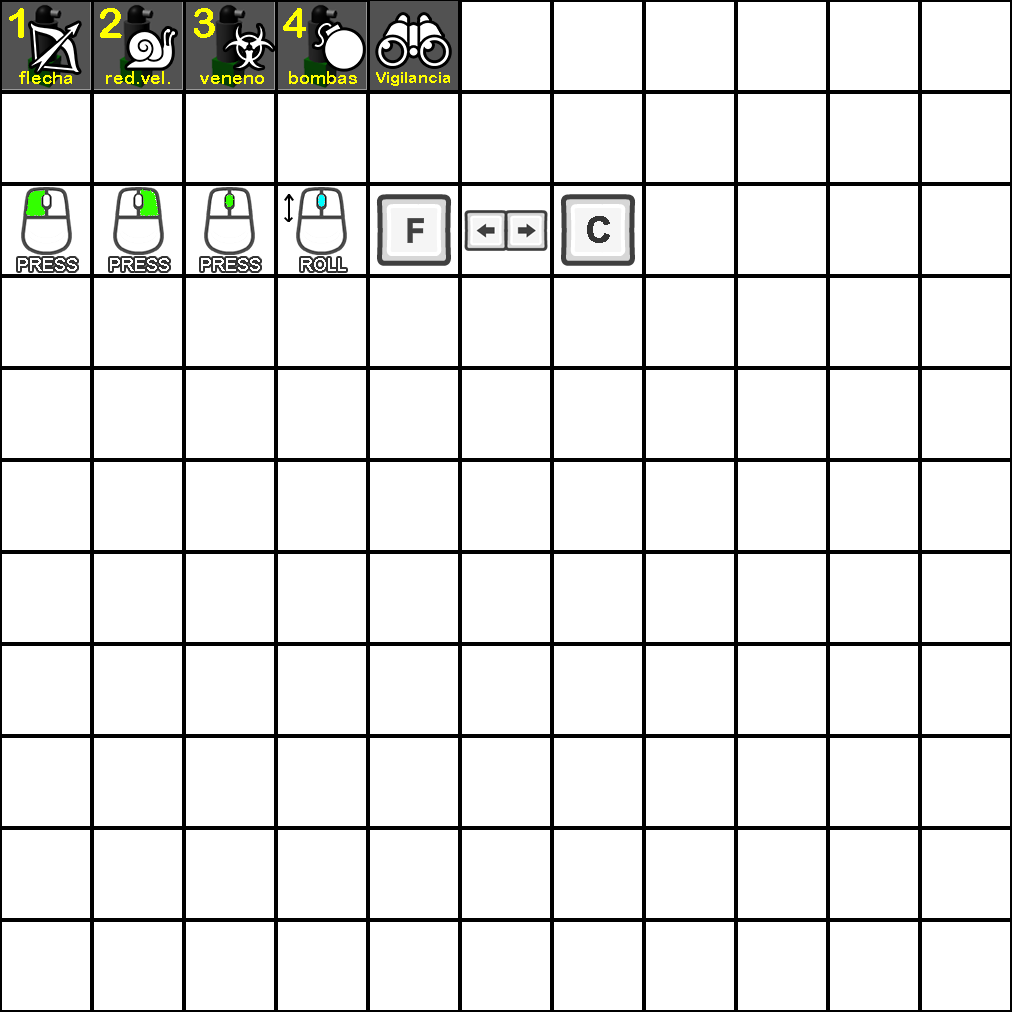
<style>
.page{position:relative;width:1012px;height:1012px;background:#ffffff}
.page>*{position:absolute;margin:0}
.t1{font:42px "ArialRoundedMTBold";color:#ffff00}
.t2{font:18px "ArialRoundedMTBold";color:#ffff00}
.t3{font:16px "ArialRoundedMTBold";color:#ffff00}
.t4{font:36px "Arial-BoldMT";color:#333333;font-weight:bold}
.t5{font:18px "ArialMT";color:#ffffff}
</style>
<div class="page">
<p class="t1" style="left:9px;top:8px;width:15px;height:30px">1</p>
<p class="t1" style="left:100px;top:8px;width:22px;height:30px">2</p>
<p class="t1" style="left:194px;top:8px;width:21px;height:30px">3</p>
<p class="t1" style="left:283px;top:8px;width:23px;height:30px">4</p>
<p class="t2" style="left:19px;top:71px;width:53px;height:13px">flecha</p>
<p class="t2" style="left:106px;top:71px;width:64px;height:13px">red.vel.</p>
<p class="t2" style="left:200px;top:75px;width:64px;height:9px">veneno</p>
<p class="t2" style="left:289px;top:71px;width:68px;height:13px">bombas</p>
<p class="t3" style="left:376px;top:72px;width:74px;height:14px">Vigilancia</p>
<p class="t4" style="left:587px;top:216px;width:23px;height:27px">C</p>
<p class="t5" style="left:18px;top:258px;width:59px;height:13px">PRESS</p>
<p class="t5" style="left:110px;top:258px;width:59px;height:13px">PRESS</p>
<p class="t5" style="left:201px;top:258px;width:59px;height:13px">PRESS</p>
<p class="t5" style="left:301px;top:258px;width:45px;height:13px">ROLL</p>
</div>
